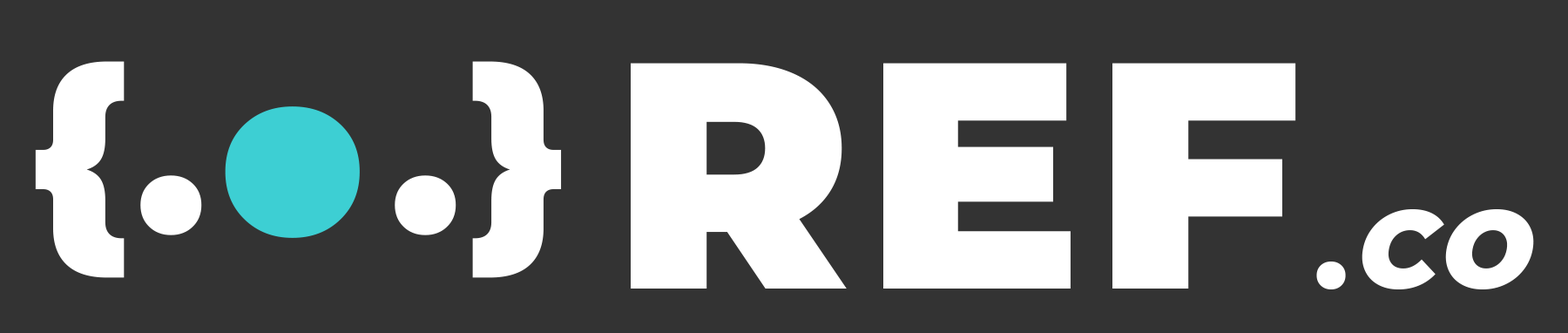
<style>
.page{position:relative;width:1568px;height:333px;background:#333333}
.page>*{position:absolute;margin:0}
.t1{font:230.6px "Montserrat-Black";letter-spacing:0.041em;color:#ffffff}
.t2{font:508.7px "Montserrat-Black";letter-spacing:0.041em;color:#3dcfd3}
.t3{font:321.6px "Montserrat-Black";letter-spacing:0.041em;color:#ffffff}
.t4{font:109.1px "Montserrat-Black";letter-spacing:0.041em;color:#ffffff}
.t5{font:109.1px "Montserrat-Black";letter-spacing:0.041em;color:#ffffff;font-style:italic}
</style>
<div class="page">
<p class="t1" style="left:35px;top:61px;width:527px;height:217px">{.<span class="t2">.</span>.}</p>
<p class="t3" style="left:631px;top:63px;width:903px;height:226px">REF<span class="t4">.</span><span class="t5">CO</span></p>
</div>
